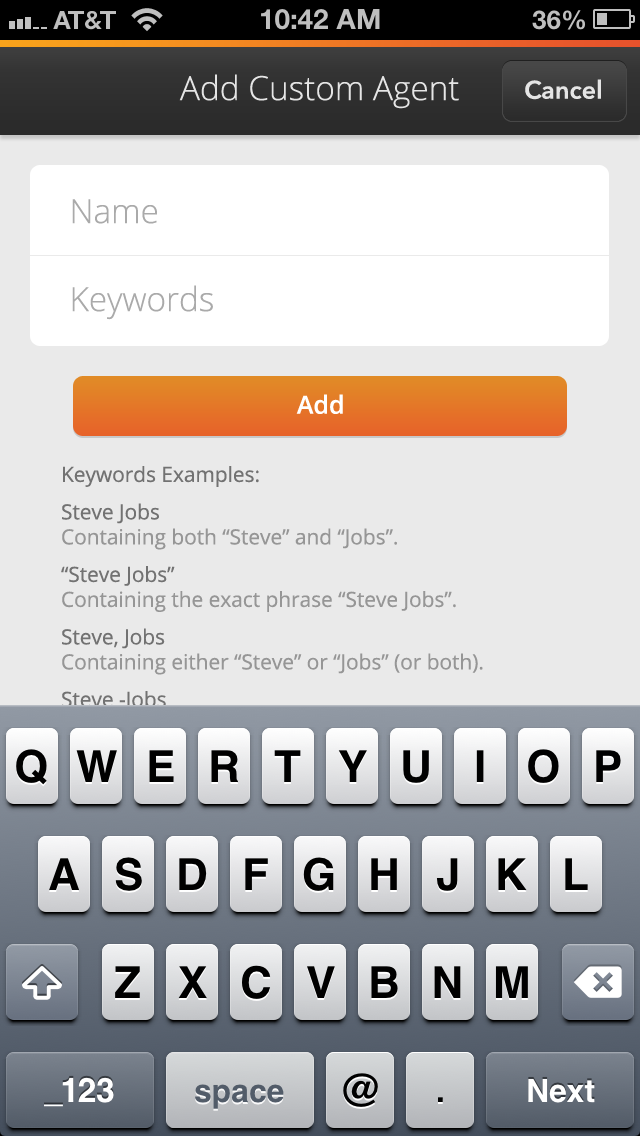
<style>
.page{position:relative;width:640px;height:1136px;background:#eaeaea}
.page>*{position:absolute;margin:0}
.t1{font:33.3px "OpenSans-Light";color:#e5e5e5}
.t2{font:25px "AvenirNext-DemiBold";color:#e5e5e5}
.t3{font:33.3px "OpenSans-Light";color:#aaaaaa}
.t4{font:25px "OpenSans-Semibold";color:#ffffff}
.t5{font:20.8px/25px "OpenSans";color:#969696}
.t6{font:20.8px/25px "OpenSans";color:#727272}
</style>
<div class="page">
<p class="t1" style="left:179px;top:74px;width:280px;height:35px">Add Custom Agent</p>
<p class="t2" style="left:525px;top:79px;width:76px;height:21px">Cancel</p>
<p class="t3" style="left:72px;top:199px;width:85px;height:25px">Name</p>
<p class="t3" style="left:72px;top:285px;width:141px;height:35px">Keywords</p>
<p class="t4" style="left:296px;top:394px;width:47px;height:20px">Add</p>
<p class="t5" style="left:61px;top:466px;width:422px;height:271px"><span class="t6">Keywords Examples:<br>Steve Jobs<br></span>Containing both “Steve” and “Jobs”.<br><span class="t6">“Steve Jobs”<br></span>Containing the exact phrase “Steve Jobs”.<br><span class="t6">Steve, Jobs<br></span>Containing either “Steve” or “Jobs” (or both).<br><span class="t6">Steve -Jobs<br></span>Containing “Steve” but not “Jobs”.</p>
</div>
